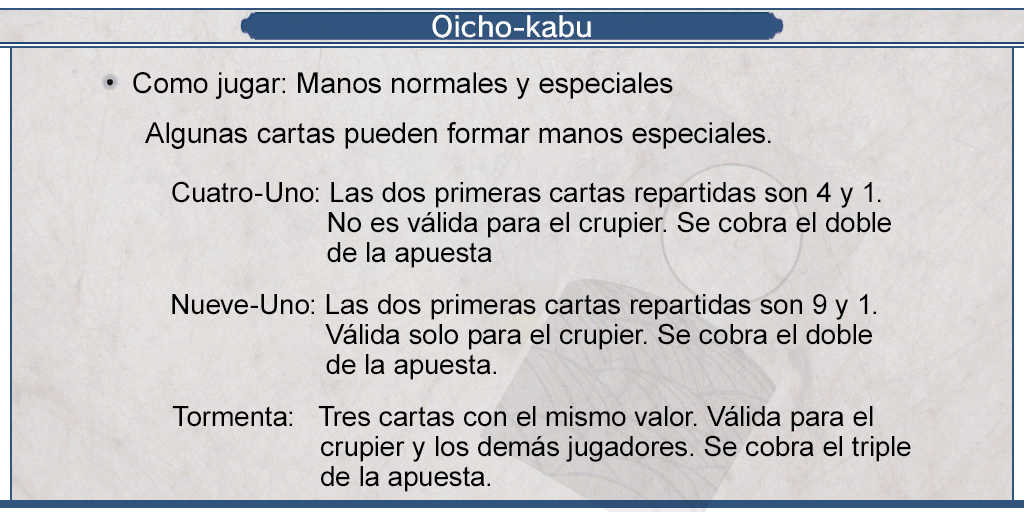
<style>
.page{position:relative;width:1024px;height:512px}
.page>*{position:absolute;margin:0}
.t1{font:29px "ArialMT";color:#000000}
.t2{font:28px/30px "ArialMT";color:#000000}
</style>
<div class="page">
<p class="t1" style="left:133px;top:72px;width:540px;height:27px">Como jugar: Manos normales y especiales</p>
<p class="t1" style="left:145px;top:122px;width:626px;height:27px">Algunas cartas pueden formar manos especiales.</p>
<p class="t2" style="left:172px;top:181px;width:719px;height:87px">Cuatro-Uno: Las dos primeras cartas repartidas son 4 y 1. <br>                    No es válida para el crupier. Se cobra el doble <br>                    de la apuesta</p>
<p class="t2" style="left:172px;top:294px;width:704px;height:86px">Nueve-Uno: Las dos primeras cartas repartidas son 9 y 1. <br>                    Válida solo para el crupier. Se cobra el doble <br>                    de la apuesta.</p>
<p class="t2" style="left:172px;top:406px;width:739px;height:86px">Tormenta:   Tres cartas con el mismo valor. Válida para el <br>                   crupier y los demás jugadores. Se cobra el triple <br>                   de la apuesta.</p>
</div>
